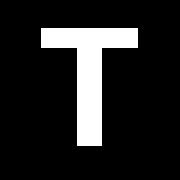
<style>
.page{position:relative;width:180px;height:180px;background:#000000}
.page>*{position:absolute;margin:0}
.t1{font:164.4px "Helvetica-Bold";letter-spacing:-0.04em;color:#ffffff}
</style>
<div class="page">
<p class="t1" style="left:41px;top:28px;width:97px;height:118px">T</p>
</div>
